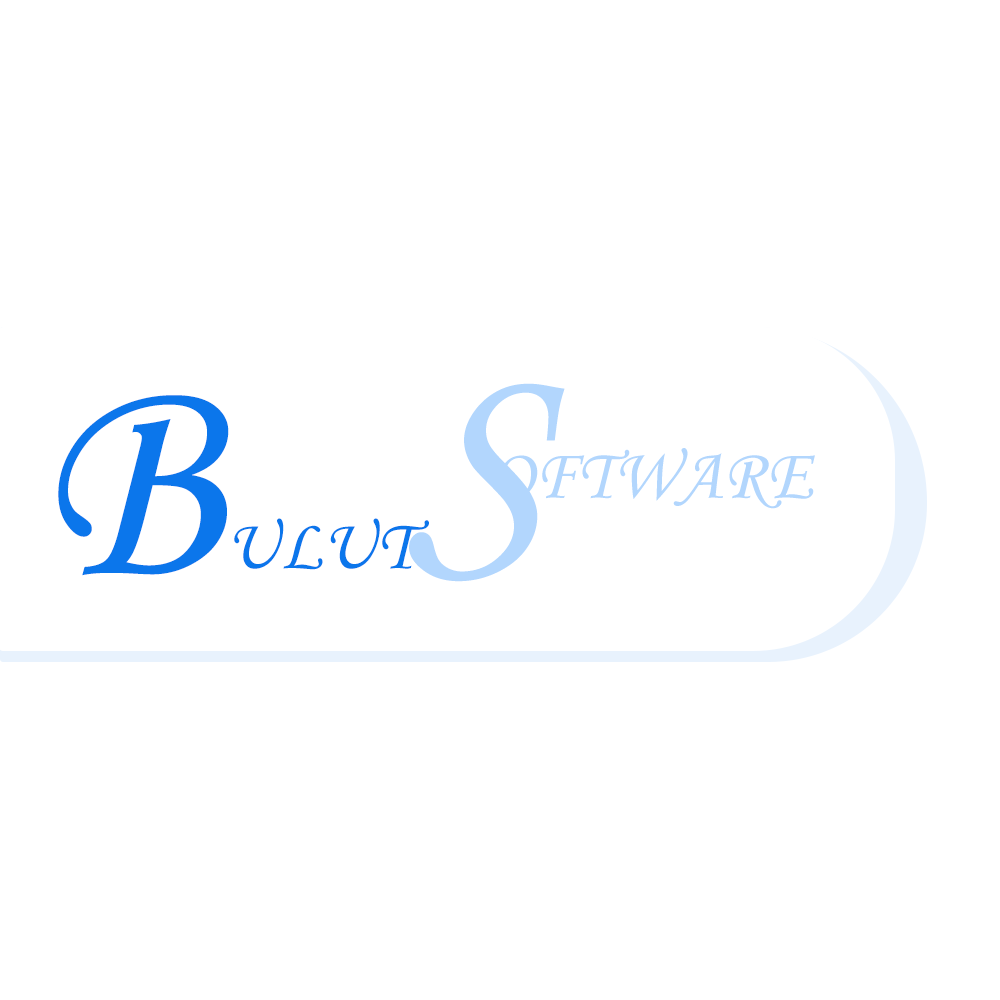
<style>
.page{position:relative;width:1000px;height:1000px;background:#ffffff}
.page>*{position:absolute;margin:0}
.t1{font:300.5px "MonotypeCorsiva";letter-spacing:0.6em;color:#b2d6fd;text-transform:uppercase}
.t2{font:300.5px "MonotypeCorsiva";letter-spacing:0.6em;color:#0b76eb;text-transform:uppercase}
.t3{font:72px "MonotypeCorsiva";letter-spacing:0.01em;color:#b2d6fd;text-transform:uppercase}
.t4{font:72px "MonotypeCorsiva";letter-spacing:0.01em;color:#0b76eb;text-transform:uppercase}
</style>
<div class="page">
<p class="t1" style="left:409px;top:383px;width:156px;height:199px">S</p>
<p class="t2" style="left:58px;top:395px;width:171px;height:181px">B</p>
<p class="t3" style="left:497px;top:448px;width:318px;height:61px">oftware</p>
<p class="t4" style="left:234px;top:518px;width:195px;height:52px">ulut</p>
</div>
